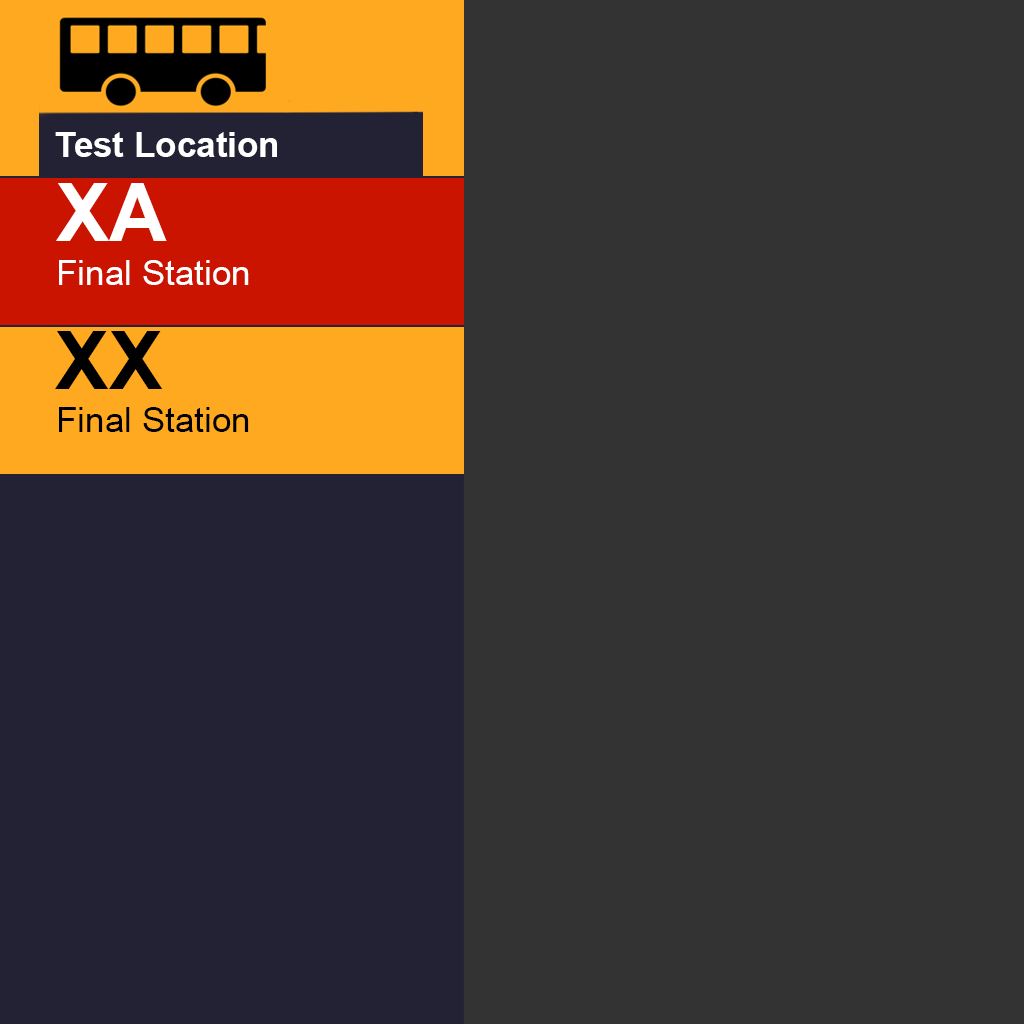
<style>
.page{position:relative;width:1024px;height:1024px;background:#333333}
.page>*{position:absolute;margin:0}
.t1{font:35px "Arial-BoldMT";color:#ffffff}
.t2{font:80px "Arial-BoldMT";color:#ffffff}
.t3{font:35px "ArialMT";color:#ffffff}
.t4{font:80px "Arial-BoldMT";color:#000000}
.t5{font:35px "ArialMT";color:#000000}
</style>
<div class="page">
<p class="t1" style="left:55px;top:132px;width:222px;height:25px">Test Location</p>
<p class="t2" style="left:56px;top:183px;width:111px;height:58px">XA</p>
<p class="t3" style="left:59px;top:260px;width:190px;height:25px">Final Station</p>
<p class="t4" style="left:55px;top:331px;width:108px;height:58px">XX</p>
<p class="t5" style="left:59px;top:407px;width:190px;height:25px">Final Station</p>
</div>
